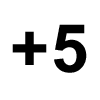
<style>
.page{position:relative;width:100px;height:100px;background:#ffffff}
.page>*{position:absolute;margin:0}
.t1{font:66.7px "Arial-BoldMT";letter-spacing:0.025em;color:#000000}
</style>
<div class="page">
<p class="t1" style="left:12px;top:24px;width:75px;height:49px">+5</p>
</div>
